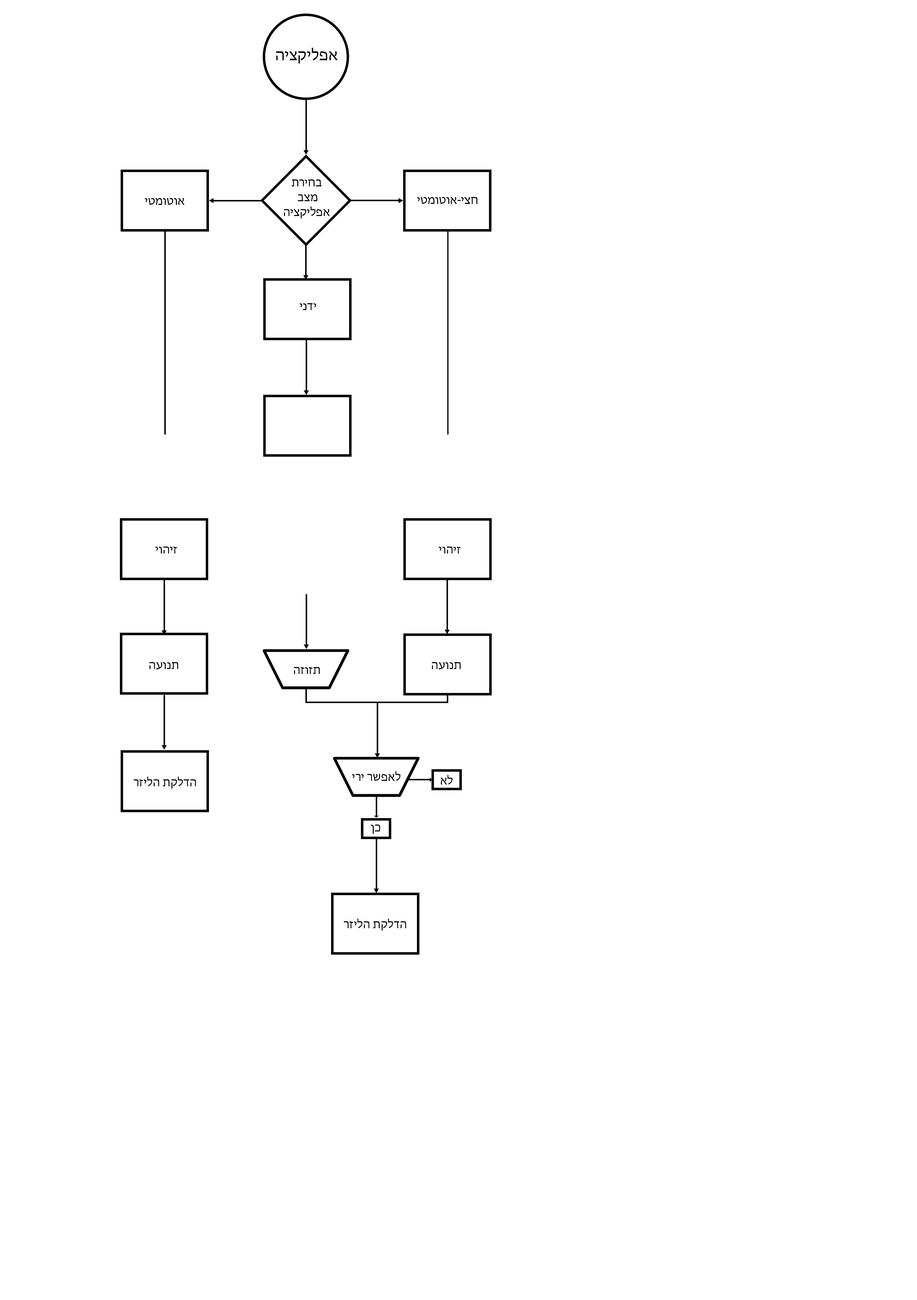
<style>
.page{position:relative;width:917px;height:1300px;background:#ffffff}
.page>*{position:absolute;margin:0}
.t1{font:16.5px "MyriadHebrew-Regular";color:#000000}
.t2{font:12.3px "MyriadHebrew-Regular";color:#000000}
</style>
<div class="page">
<p class="t1" style="left:276px;top:48px;width:62px;height:16px">אפליקציה</p>
<p class="t2" style="left:284px;top:179px;width:46px;height:39px;text-align:center">בחירת<br> מצב<br>אפליקציה</p>
<p class="t2" style="left:145px;top:198px;width:40px;height:7px">אוטומטי</p>
<p class="t2" style="left:417px;top:197px;width:61px;height:7px">חצי-אוטומטי</p>
<p class="t2" style="left:300px;top:303px;width:16px;height:7px">ידני</p>
<p class="t2" style="left:155px;top:546px;width:22px;height:7px">זיהוי</p>
<p class="t2" style="left:439px;top:546px;width:22px;height:7px">זיהוי</p>
<p class="t2" style="left:149px;top:662px;width:29px;height:7px">תנועה</p>
<p class="t2" style="left:432px;top:662px;width:29px;height:7px">תנועה</p>
<p class="t2" style="left:294px;top:667px;width:26px;height:7px">תזוזה</p>
<p class="t2" style="left:352px;top:771px;width:49px;height:10px">לאפשר ירי</p>
<p class="t2" style="left:134px;top:776px;width:62px;height:13px">הדלקת הליזר</p>
<p class="t2" style="left:441px;top:775px;width:12px;height:9px">לא</p>
<p class="t2" style="left:371px;top:824px;width:9px;height:10px">כן</p>
<p class="t2" style="left:344px;top:918px;width:62px;height:13px">הדלקת הליזר</p>
</div>
